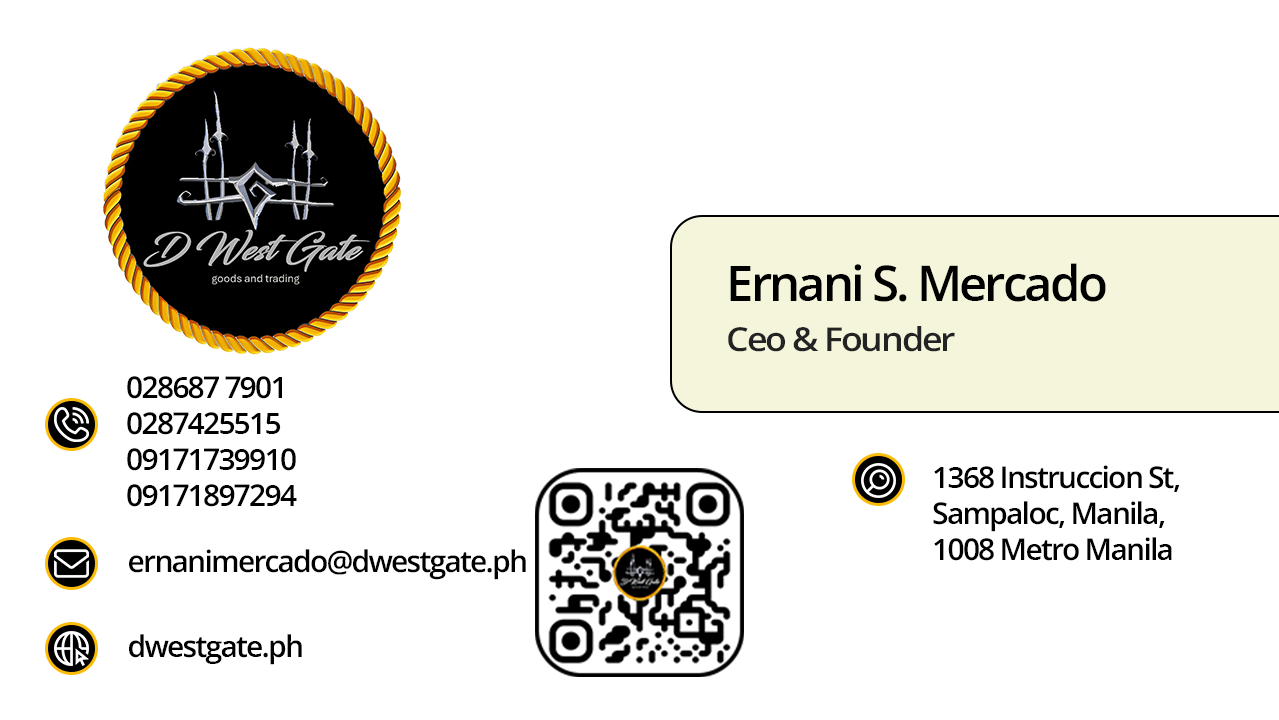
<style>
.page{position:relative;width:1279px;height:720px;background:#ffffff}
.page>*{position:absolute;margin:0}
.t1{font:49.3px "OpenSansRoman-SemiBold";letter-spacing:-0.06em;color:#000000;font-weight:bold}
.t2{font:32.9px "OpenSansRoman-SemiBold";letter-spacing:-0.06em;color:#232323;font-weight:bold;scale:1.09 1}
.t3{font:30px "OpenSansRoman-SemiBold";letter-spacing:-0.06em;color:#000000;font-weight:bold}
</style>
<div class="page">
<p class="t1" style="left:730px;top:263px;width:376px;height:39px">Ernani S. Mercado</p>
<p class="t2" style="left:728px;top:326px;width:227px;height:26px">Ceo &amp; Founder</p>
<p class="t3" style="left:127px;top:376px;width:170px;height:131px">028687 7901<br>0287425515<br>09171739910 <br>09171897294</p>
<p class="t3" style="left:933px;top:465px;width:247px;height:96px">1368 Instruccion St,<br>Sampaloc, Manila, <br>1008 Metro Manila</p>
<p class="t3" style="left:129px;top:549px;width:397px;height:31px">ernanimercado@dwestgate.ph</p>
<p class="t3" style="left:129px;top:634px;width:173px;height:31px">dwestgate.ph</p>
</div>
